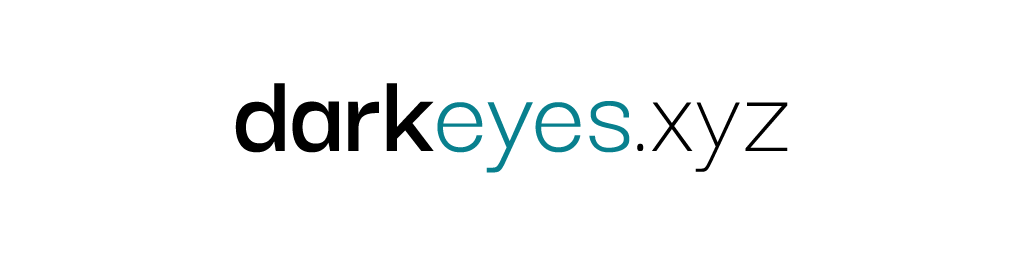
<style>
.page{position:relative;width:1024px;height:256px;background:#ffffff}
.page>*{position:absolute;margin:0}
.t1{font:120px "DarkerGrotesque-SemiBold";color:#000000}
.t2{font:120px "DarkerGrotesque-Regular";color:#08808e}
.t3{font:120px "DarkerGrotesque-Light";color:#000000}
</style>
<div class="page">
<p class="t1" style="left:235px;top:83px;width:553px;height:90px">dark<span class="t2">eyes</span><span class="t3">.xyz</span></p>
</div>
